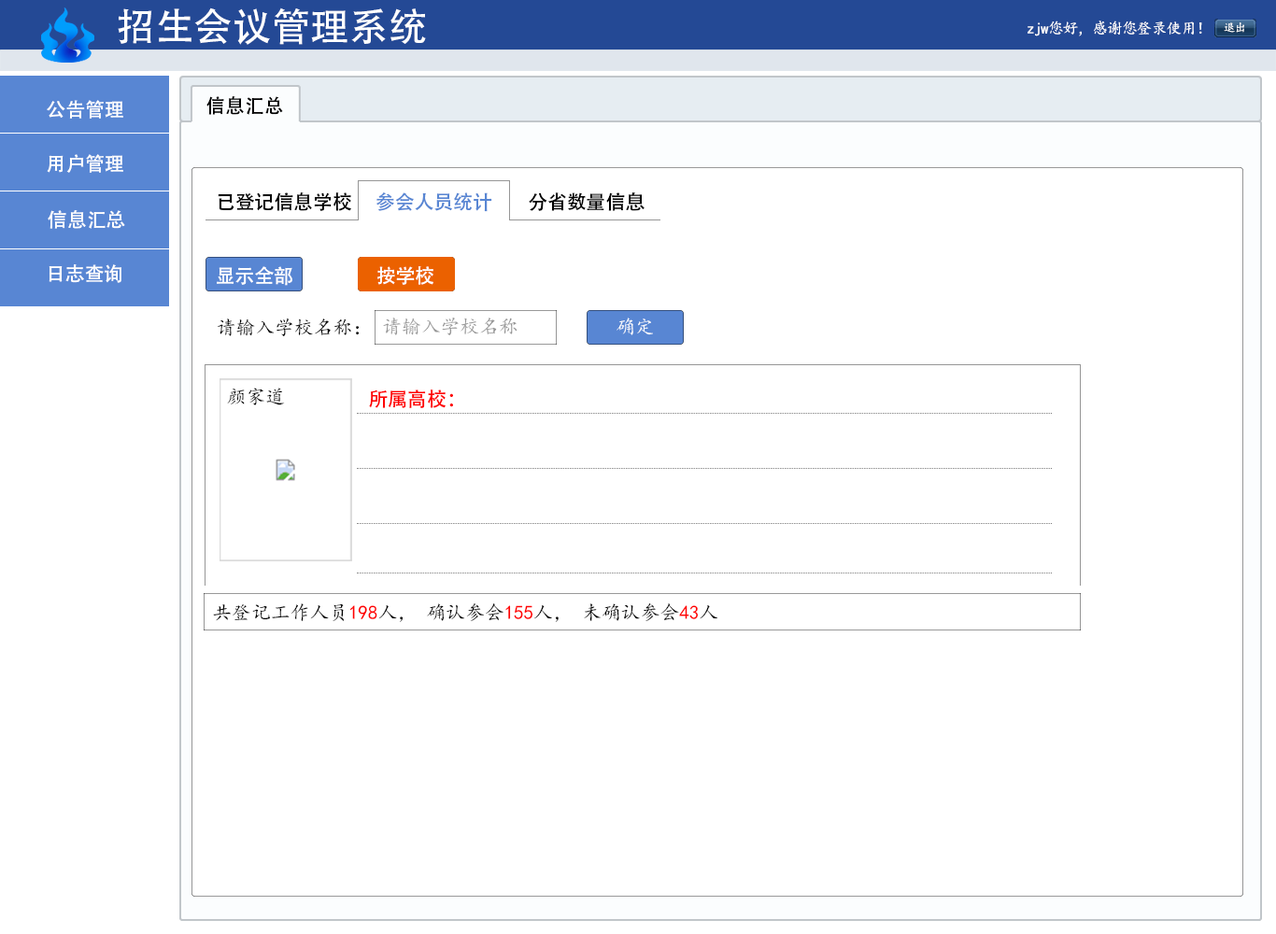
<style>
.page{position:relative;width:1276px;height:934px;background:#ffffff}
.page>*{position:absolute;margin:0}
.t1{font:38.9px "AdobeHeitiStd-Regular";color:#ffffff}
.t2{font:15.6px "KaiTi";letter-spacing:-0.05em;color:#ffffff}
.t3{font:11.7px "KaiTi";letter-spacing:-0.05em;color:#ffffff}
.t4{font:19.5px "AdobeHeitiStd-Regular";color:#fefefe}
.t5{font:19.5px "AdobeHeitiStd-Regular";color:#000000}
.t6{font:19.5px "AdobeHeitiStd-Regular";color:#5886d3}
.t7{font:19.5px "AdobeHeitiStd-Regular";color:#ffffff}
.t8{font:19.5px "KaiTi";color:#969696}
.t9{font:19.5px "KaiTi";color:#fefefe}
.t10{font:19.5px "KaiTi";color:#000000}
.t11{font:19.5px "AdobeHeitiStd-Regular";color:#fe0000}
.t12{font:19.5px "KaiTi";color:#ff0000}
</style>
<div class="page">
<p class="t1" style="left:118px;top:7px;width:308px;height:38px">招生会议管理系统</p>
<p class="t2" style="left:1028px;top:21px;width:174px;height:15px">zjw您好，感谢您登录使用！</p>
<p class="t3" style="left:1224px;top:22px;width:21px;height:11px">退出</p>
<p class="t4" style="left:47px;top:100px;width:76px;height:19px">公告管理</p>
<p class="t5" style="left:206px;top:96px;width:77px;height:19px">信息汇总</p>
<p class="t4" style="left:47px;top:154px;width:76px;height:19px">用户管理</p>
<p class="t5" style="left:218px;top:192px;width:133px;height:19px">已登记信息学校</p>
<p class="t6" style="left:377px;top:192px;width:115px;height:20px">参会人员统计</p>
<p class="t5" style="left:529px;top:192px;width:116px;height:19px">分省数量信息</p>
<p class="t4" style="left:48px;top:210px;width:77px;height:19px">信息汇总</p>
<p class="t4" style="left:49px;top:264px;width:72px;height:19px">日志查询</p>
<p class="t7" style="left:217px;top:266px;width:75px;height:20px">显示全部</p>
<p class="t7" style="left:377px;top:266px;width:57px;height:19px">按学校</p>
<p class="t8" style="left:383px;top:318px;width:135px;height:17px">请输入学校名称</p>
<p class="t9" style="left:617px;top:318px;width:36px;height:17px">确定</p>
<p class="t10" style="left:217px;top:319px;width:143px;height:17px">请输入学校名称：</p>
<p class="t10" style="left:227px;top:388px;width:58px;height:17px">颜家道</p>
<p class="t11" style="left:369px;top:390px;width:84px;height:18px">所属高校：</p>
<p class="t10" style="left:213px;top:604px;width:505px;height:18px">共登记工作人员<span class="t12">198</span>人， 确认参会<span class="t12">155</span>人， 未确认参会<span class="t12">43</span>人</p>
</div>
